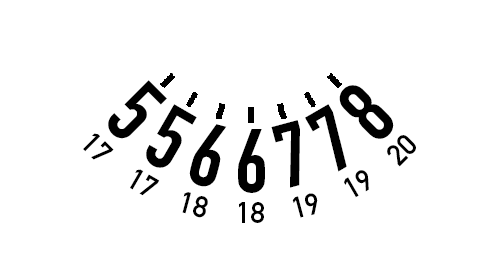
<style>
.page{position:relative;width:480px;height:280px;background:#ffffff}
.page>*{position:absolute;margin:0}
.t1{font:88.9px "DINEngschriftStd";color:#000000}
.t2{font:29.6px "DINMittelschriftStd";color:#000000}
</style>
<div class="page">
<p class="t1" style="left:108px;top:80px;width:59px;height:59px;rotate:45deg">5</p>
<p class="t1" style="left:339px;top:85px;width:55px;height:54px;rotate:-45deg">8</p>
<p class="t1" style="left:146px;top:104px;width:51px;height:64px;rotate:30deg">5</p>
<p class="t1" style="left:305px;top:104px;width:42px;height:68px;rotate:-30deg">7</p>
<p class="t1" style="left:189px;top:124px;width:38px;height:63px;rotate:15deg">6</p>
<p class="t1" style="left:271px;top:120px;width:29px;height:68px;rotate:-15deg">7</p>
<p class="t2" style="left:83px;top:133px;width:31px;height:27px;rotate:45deg">17</p>
<p class="t1" style="left:238px;top:129px;width:27px;height:64px">6</p>
<p class="t2" style="left:387px;top:135px;width:29px;height:32px;rotate:-45deg">20</p>
<p class="t2" style="left:130px;top:169px;width:30px;height:27px;rotate:30deg">17</p>
<p class="t2" style="left:344px;top:170px;width:25px;height:28px;rotate:-30deg">19</p>
<p class="t2" style="left:182px;top:192px;width:26px;height:26px;rotate:15deg">18</p>
<p class="t2" style="left:292px;top:193px;width:26px;height:25px;rotate:-15deg">19</p>
<p class="t2" style="left:239px;top:202px;width:25px;height:21px">18</p>
</div>
